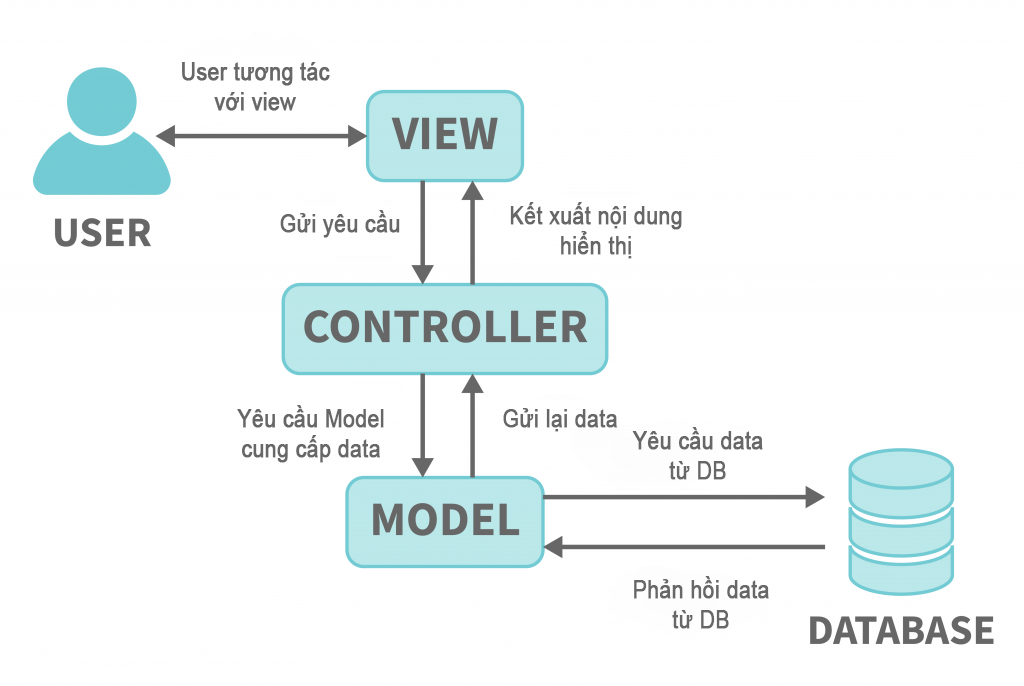
<style>
.page{position:relative;width:1024px;height:686px;background:#ffffff}
.page>*{position:absolute;margin:0}
.t1{font:25.3px "ArialMT";color:#676767;font-weight:bold;scale:0.83 1}
</style>
<div class="page">
<p class="t1" style="left:510px;top:202px;width:172px;height:57px;text-align:center">Kết xuất nội dung<br>hiển thị</p>
<p class="t1" style="left:280px;top:210px;width:120px;height:28px">Gửi yêu cầu</p>
<p class="t1" style="left:237px;top:405px;width:147px;height:58px;text-align:center">Yêu cầu Model<br>cung cấp data</p>
<p class="t1" style="left:503px;top:408px;width:114px;height:24px">Gửi lại data</p>
<p class="t1" style="left:632px;top:427px;width:131px;height:53px;text-align:center">Yêu cầu data<br>từ DB</p>
<p class="t1" style="left:634px;top:576px;width:135px;height:53px;text-align:center">Phản hồi data<br>từ DB</p>
</div>
